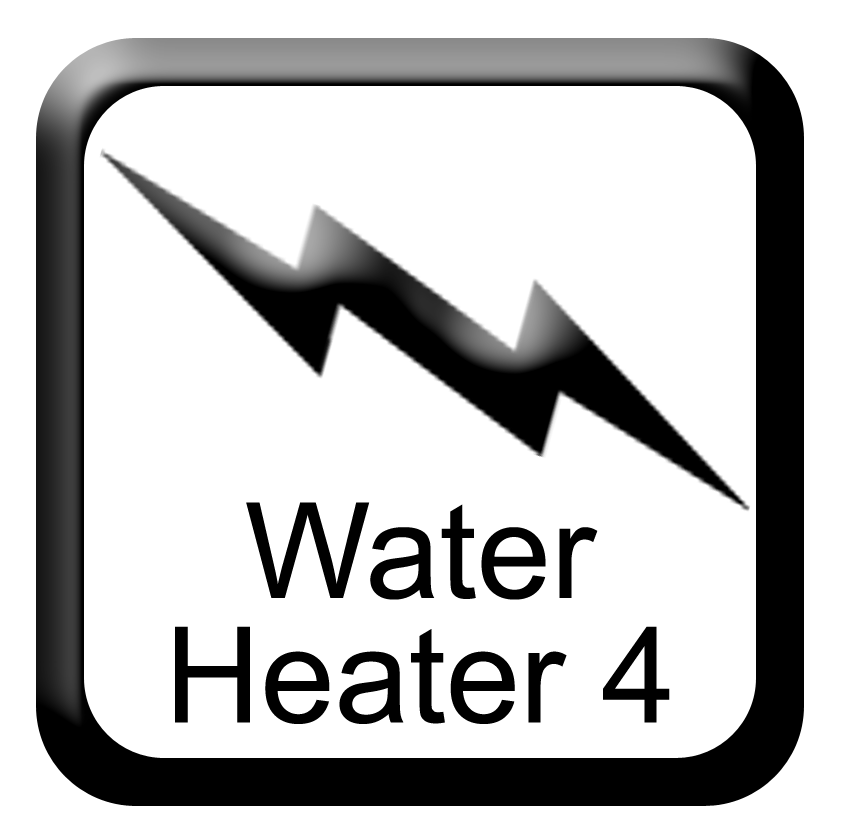
<style>
.page{position:relative;width:844px;height:836px;background:#ffffff}
.page>*{position:absolute;margin:0}
.t1{font:133.3px/124.4px "ArialMT";color:#000000}
</style>
<div class="page">
<p class="t1" style="left:175px;top:502px;width:495px;height:222px;text-align:center">Water<br>Heater 4</p>
</div>
